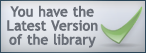
<style>
.page{position:relative;width:146px;height:53px}
.page>*{position:absolute;margin:0}
.t1{font:14px/14px "TrebuchetMS";color:#696e77;font-weight:bold}
</style>
<div class="page">
<p class="t1" style="left:7px;top:5px;width:91px;height:43px;text-align:center">You have the<br>Latest Version<br>of the library</p>
</div>
